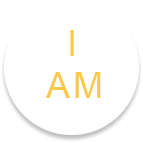
<style>
.page{position:relative;width:143px;height:143px;background:#ffffff}
.page>*{position:absolute;margin:0}
.t1{font:36px "ArialMT";color:#fac947}
.t2{font:36px "ArialMT";letter-spacing:-0.06em;color:#fac947}
</style>
<div class="page">
<p class="t1" style="left:70px;top:30px;width:4px;height:26px">I</p>
<p class="t2" style="left:46px;top:72px;width:55px;height:26px">A M</p>
</div>
